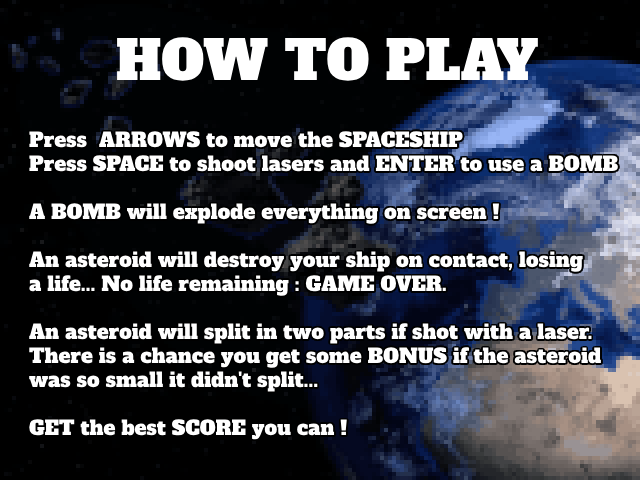
<style>
.page{position:relative;width:640px;height:480px;background:#000000}
.page>*{position:absolute;margin:0}
.t1{font:54px "AlfaSlabOne-Regular";color:#ffffff}
.t2{font:20px "AlfaSlabOne-Regular";color:#ffffff}
</style>
<div class="page">
<p class="t1" style="left:117px;top:37px;width:421px;height:44px">HOW TO PLAY</p>
<p class="t2" style="left:29px;top:131px;width:589px;height:309px">Press  ARROWS to move the SPACESHIP<br>Press SPACE to shoot lasers and ENTER to use a BOMB<br><br>A BOMB will explode everything on screen ! <br><br>An asteroid will destroy your ship on contact, losing<br>a life... No life remaining : GAME OVER.<br><br>An asteroid will split in two parts if shot with a laser.<br>There is a chance you get some BONUS if the asteroid<br>was so small it didn't split...<br><br>GET the best SCORE you can !</p>
</div>
